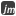
<style>
.page{position:relative;width:16px;height:16px;background:#3d3d3d}
.page>*{position:absolute;margin:0}
.t1{font:10.4px "SourceSansPro-SemiboldIt";color:#ffffff}
</style>
<div class="page">
<p class="t1" style="left:2px;top:4px;width:5px;height:11px">j</p>
<p class="t1" style="left:7px;top:7px;width:8px;height:6px">m</p>
</div>
